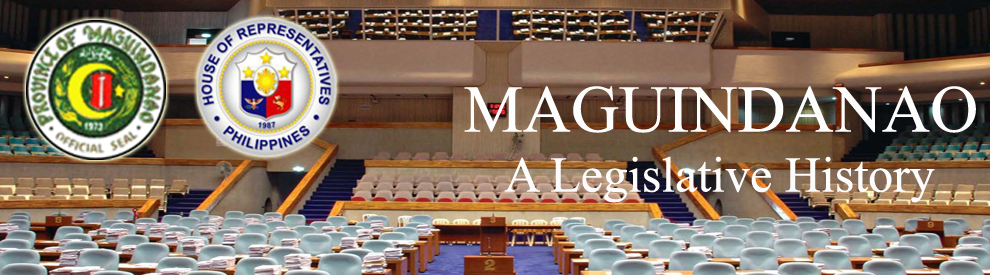
<style>
.page{position:relative;width:990px;height:275px}
.page>*{position:absolute;margin:0}
.t1{font:50px "TimesNewRomanPSMT";color:#fdfcfc}
.t2{font:66.7px "TimesNewRomanPSMT";color:#fdfdfd}
</style>
<div class="page">
<p class="t1" style="left:464px;top:86px;width:512px;height:117px;text-align:center"><span class="t2">MAGUINDANAO<br></span>A Legislative History</p>
</div>
